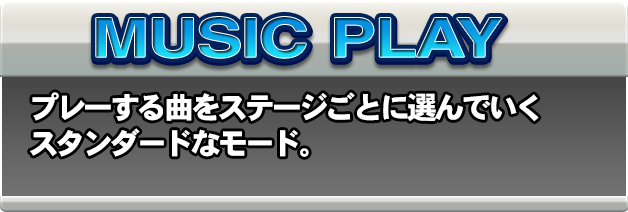
<style>
.page{position:relative;width:628px;height:212px}
.page>*{position:absolute;margin:0}
.t1{font:54px "HelveticaLTStd-Bold";letter-spacing:-0.025em;scale:1.29 1}
.t2{font:30px "DFHSGothic-W9-WIN-RKSJ-H";letter-spacing:-0.1em;color:#ffffff}
</style>
<div class="page">
<p class="t1" style="left:96px;top:17px;width:406px;height:41px">MUSIC PLAY</p>
<p class="t2" style="left:30px;top:92px;width:509px;height:65px">プレ一する曲をステ一ジごとに選んでいく<br>スタンダードなモード。</p>
</div>
